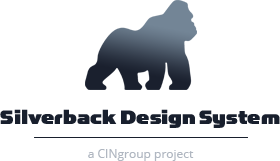
<style>
.page{position:relative;width:280px;height:161px;background:#ffffff}
.page>*{position:absolute;margin:0}
.t1{font:22px "SimianDisplay-Gorilla";color:#181f2d}
.t2{font:12px "OpenSans";color:#b0b7c1}
</style>
<div class="page">
<p class="t1" style="left:0px;top:109px;width:280px;height:19px">Silverback Design System</p>
<p class="t2" style="left:88px;top:149px;width:106px;height:12px">a CINgroup project</p>
</div>
